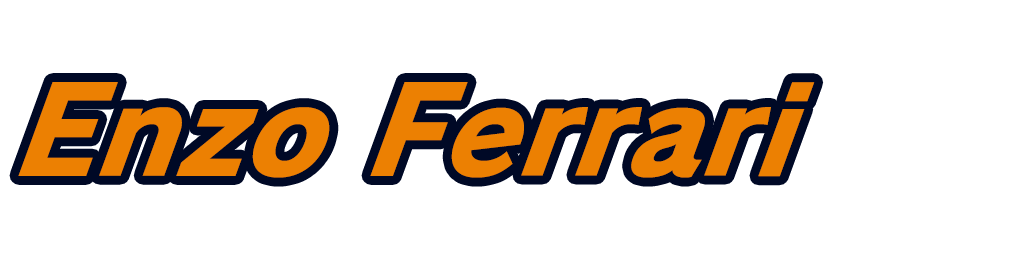
<style>
.page{position:relative;width:1024px;height:256px;background:#ffffff}
.page>*{position:absolute;margin:0}
.t1{font:128px "RodinPro-EB";letter-spacing:0.001em;color:#ec8002;scale:0.94 1}
</style>
<div class="page">
<p class="t1" style="left:18px;top:82px;width:797px;height:96px">Enzo Ferrari</p>
</div>
